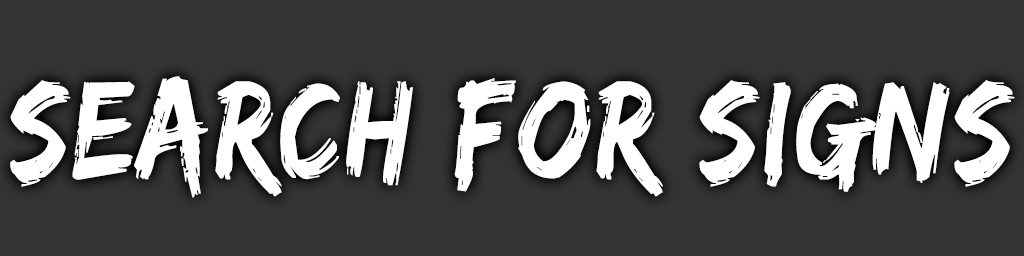
<style>
.page{position:relative;width:1024px;height:256px;background:#333333}
.page>*{position:absolute;margin:0}
.t1{font:145.6px "EdoSZ";letter-spacing:0.03em;color:#ffffff;scale:0.85 1}
</style>
<div class="page">
<p class="t1" style="left:10px;top:76px;width:1005px;height:122px">Search for signs</p>
</div>
